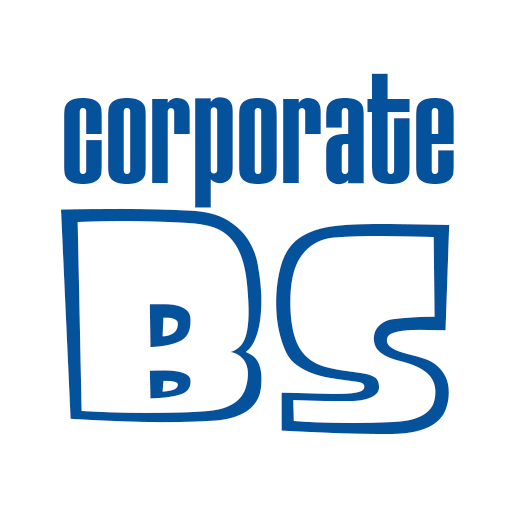
<style>
.page{position:relative;width:512px;height:512px;background:#ffffff}
.page>*{position:absolute;margin:0}
.t1{font:126px "HouseGothic-BoldTwo";color:#04529c}
.t2{font:282px "FinkGothic";color:#04529c}
</style>
<div class="page">
<p class="t1" style="left:64px;top:73px;width:390px;height:135px">corporate</p>
<p class="t2" style="left:61px;top:208px;width:389px;height:226px">BS</p>
</div>
